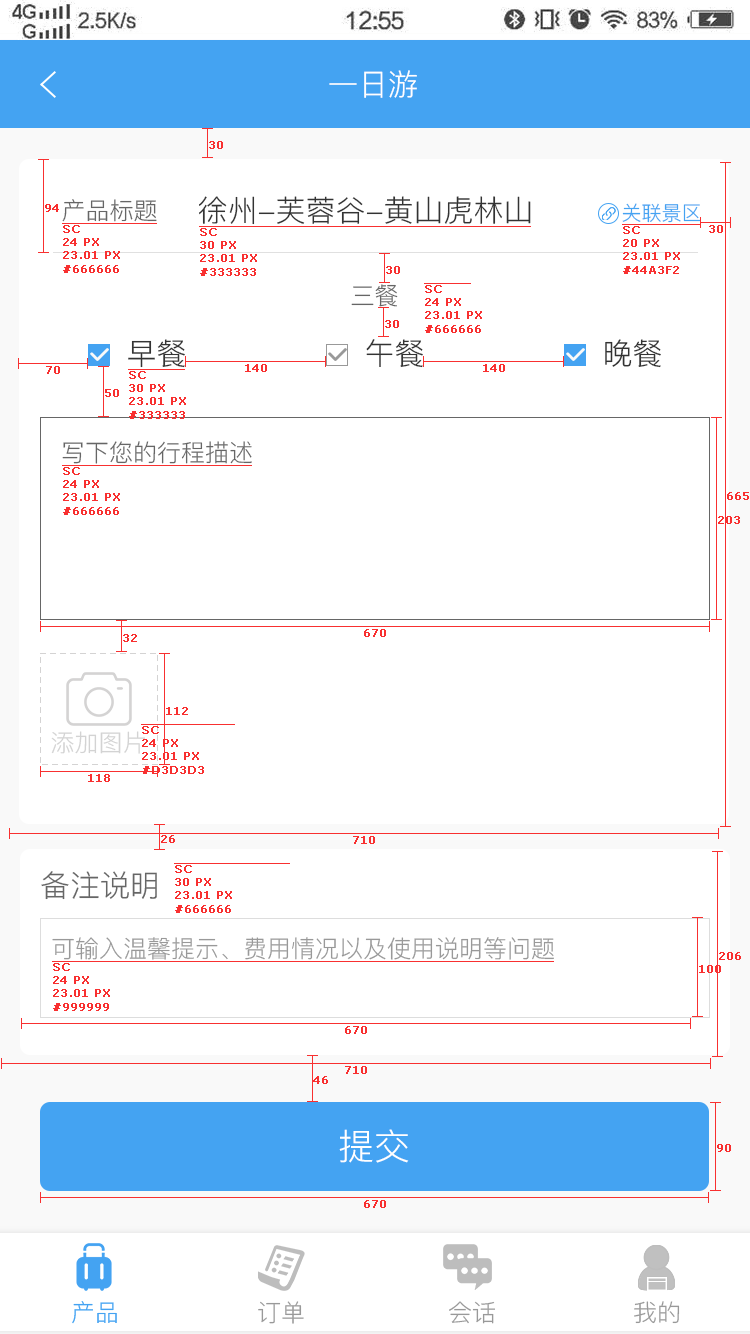
<style>
.page{position:relative;width:750px;height:1334px;background:#ffffff}
.page>*{position:absolute;margin:0}
.t1{font:30px "PingFang-SC-Regular";color:#ffffff;text-transform:uppercase}
.t2{font:11px "Verdana";color:#f83030;font-weight:bold}
.t3{font:30px "PingFang-SC-Regular";color:#333333;text-transform:uppercase}
.t4{font:24px "PingFang-SC-Regular";color:#666666;text-transform:uppercase}
.t5{font:20px "PingFang-SC-Regular";color:#44a3f2;text-transform:uppercase}
.t6{font:24px "PingFang-SC-Regular";color:#d3d3d3;text-transform:uppercase}
.t7{font:30px "PingFang-SC-Regular";color:#666666;text-transform:uppercase}
.t8{font:24px "PingFang-SC-Regular";color:#999999;text-transform:uppercase}
.t9{font:36px "PingFang-SC-Regular";color:#ffffff;text-transform:uppercase}
.t10{font:24px "PingFang-SC-Regular";color:#44a3f2;text-transform:uppercase}
</style>
<div class="page">
<p class="t1" style="left:329px;top:70px;width:88px;height:28px">一日游</p>
<p class="t2" style="left:209px;top:141px;width:14px;height:8px">30</p>
<p class="t3" style="left:199px;top:196px;width:332px;height:29px">徐州-芙蓉谷-黄山虎林山</p>
<p class="t2" style="left:45px;top:204px;width:14px;height:8px">94</p>
<p class="t4" style="left:62px;top:199px;width:95px;height:23px">产品标题</p>
<p class="t5" style="left:622px;top:203px;width:79px;height:20px">关联景区</p>
<p class="t2" style="left:63px;top:225px;width:57px;height:48px">SC<br>24 PX<br>23.01 PX<br>#666666</p>
<p class="t2" style="left:200px;top:228px;width:57px;height:48px">SC<br>30 PX<br>23.01 PX<br>#333333</p>
<p class="t2" style="left:623px;top:226px;width:57px;height:48px">SC<br>20 PX<br>23.01 PX<br>#44A3F2</p>
<p class="t2" style="left:709px;top:225px;width:14px;height:8px">30</p>
<p class="t2" style="left:386px;top:266px;width:14px;height:8px">30</p>
<p class="t4" style="left:351px;top:284px;width:47px;height:23px">三餐</p>
<p class="t2" style="left:425px;top:285px;width:57px;height:48px">SC<br>24 PX<br>23.01 PX<br>#666666</p>
<p class="t2" style="left:385px;top:320px;width:14px;height:8px">30</p>
<p class="t3" style="left:128px;top:339px;width:57px;height:29px">早餐</p>
<p class="t3" style="left:366px;top:339px;width:57px;height:29px">午餐</p>
<p class="t3" style="left:605px;top:339px;width:56px;height:29px">晚餐</p>
<p class="t2" style="left:46px;top:366px;width:14px;height:8px">70</p>
<p class="t2" style="left:245px;top:364px;width:22px;height:8px">140</p>
<p class="t2" style="left:483px;top:364px;width:22px;height:8px">140</p>
<p class="t2" style="left:129px;top:371px;width:57px;height:48px">SC<br>30 PX<br>23.01 PX<br>#333333</p>
<p class="t2" style="left:105px;top:389px;width:14px;height:8px">50</p>
<p class="t4" style="left:62px;top:441px;width:190px;height:23px">写下您的行程描述</p>
<p class="t2" style="left:63px;top:467px;width:57px;height:48px">SC<br>24 PX<br>23.01 PX<br>#666666</p>
<p class="t2" style="left:727px;top:492px;width:22px;height:8px">665</p>
<p class="t2" style="left:718px;top:516px;width:22px;height:8px">203</p>
<p class="t2" style="left:364px;top:629px;width:22px;height:8px">670</p>
<p class="t2" style="left:123px;top:634px;width:14px;height:8px">32</p>
<p class="t2" style="left:166px;top:707px;width:22px;height:8px">112</p>
<p class="t2" style="left:142px;top:726px;width:62px;height:48px">SC<br>24 PX<br>23.01 PX<br>#D3D3D3</p>
<p class="t6" style="left:51px;top:731px;width:94px;height:23px">添加图片</p>
<p class="t2" style="left:88px;top:774px;width:22px;height:8px">118</p>
<p class="t2" style="left:161px;top:835px;width:14px;height:8px">26</p>
<p class="t2" style="left:353px;top:836px;width:22px;height:8px">710</p>
<p class="t2" style="left:175px;top:865px;width:57px;height:48px">SC<br>30 PX<br>23.01 PX<br>#666666</p>
<p class="t7" style="left:41px;top:871px;width:116px;height:29px">备注说明</p>
<p class="t8" style="left:52px;top:937px;width:502px;height:23px">可输入温馨提示、费用情况以及使用说明等问题</p>
<p class="t2" style="left:719px;top:952px;width:22px;height:8px">206</p>
<p class="t2" style="left:53px;top:963px;width:57px;height:48px">SC<br>24 PX<br>23.01 PX<br>#999999</p>
<p class="t2" style="left:699px;top:965px;width:22px;height:8px">100</p>
<p class="t2" style="left:345px;top:1026px;width:22px;height:8px">670</p>
<p class="t2" style="left:345px;top:1066px;width:22px;height:8px">710</p>
<p class="t2" style="left:313px;top:1076px;width:15px;height:8px">46</p>
<p class="t9" style="left:339px;top:1129px;width:70px;height:34px">提交</p>
<p class="t2" style="left:717px;top:1144px;width:14px;height:8px">90</p>
<p class="t2" style="left:364px;top:1200px;width:22px;height:8px">670</p>
<p class="t10" style="left:72px;top:1301px;width:45px;height:23px">产品</p>
<p class="t8" style="left:258px;top:1301px;width:46px;height:23px">订单</p>
<p class="t8" style="left:449px;top:1301px;width:46px;height:23px">会话</p>
<p class="t8" style="left:634px;top:1301px;width:46px;height:23px">我的</p>
</div>
